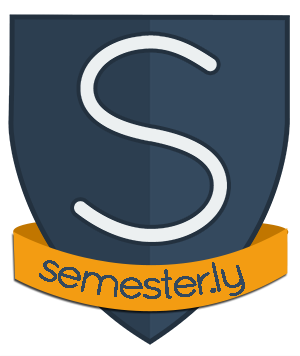
<style>
.page{position:relative;width:300px;height:356px;background:#ffffff}
.page>*{position:absolute;margin:0}
.t1{font:41.6px "Quicksand-Regular";letter-spacing:-0.1em;color:#34495e}
</style>
<div class="page">
<p class="t1" style="left:39px;top:260px;width:206px;height:39px;rotate:2deg">semester.ly</p>
</div>
